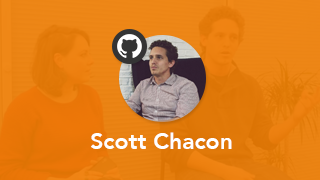
<style>
.page{position:relative;width:320px;height:180px}
.page>*{position:absolute;margin:0}
.t1{font:23px "Avenir-Heavy";color:#ffffff}
</style>
<div class="page">
<p class="t1" style="left:91px;top:132px;width:141px;height:17px">Scott Chacon</p>
</div>
